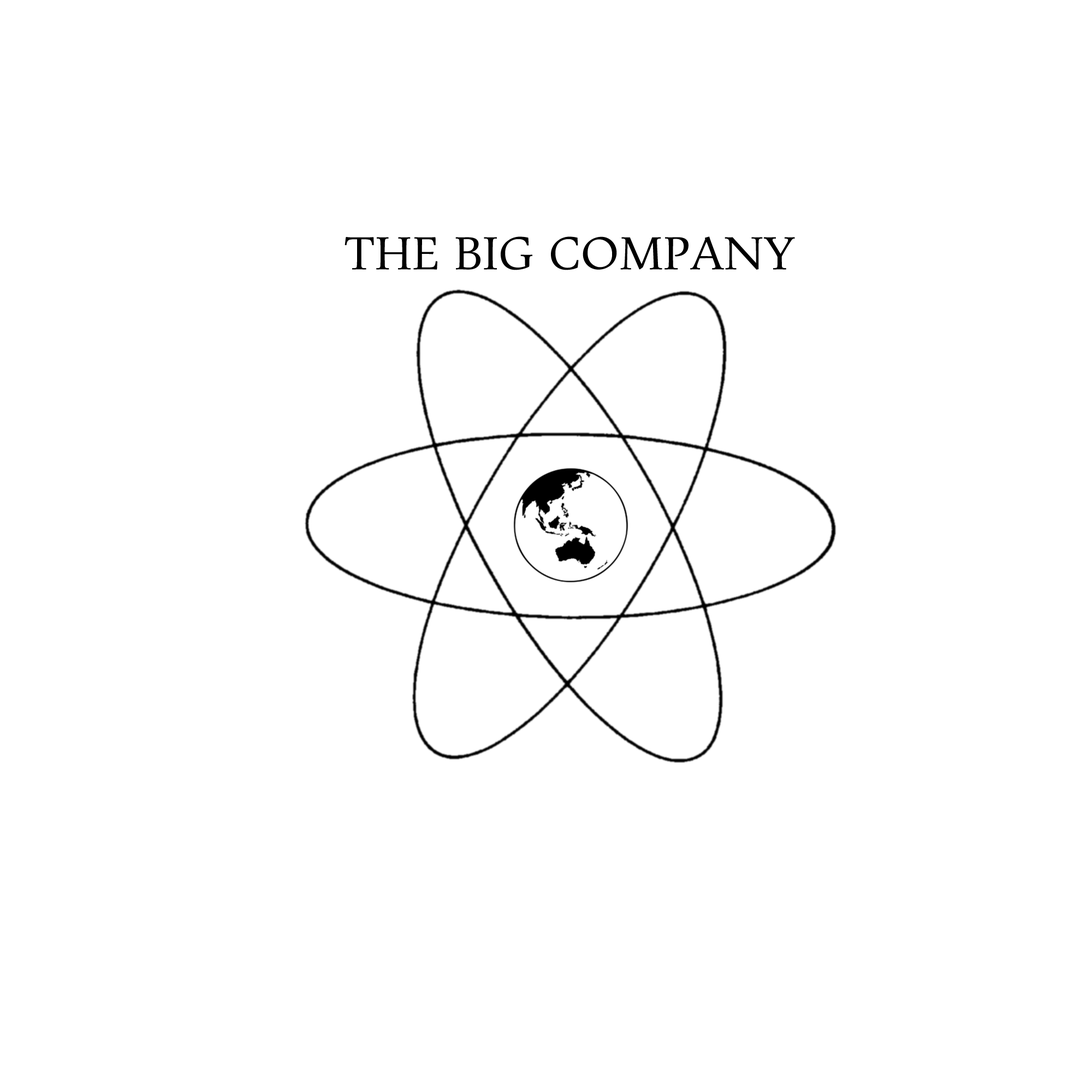
<style>
.page{position:relative;width:1092px;height:1092px;background:#ffffff}
.page>*{position:absolute;margin:0}
.t1{font:49.1px "Pescadero";color:#000000}
</style>
<div class="page">
<p class="t1" style="left:345px;top:236px;width:450px;height:34px">THE BIG COMPANY</p>
</div>
